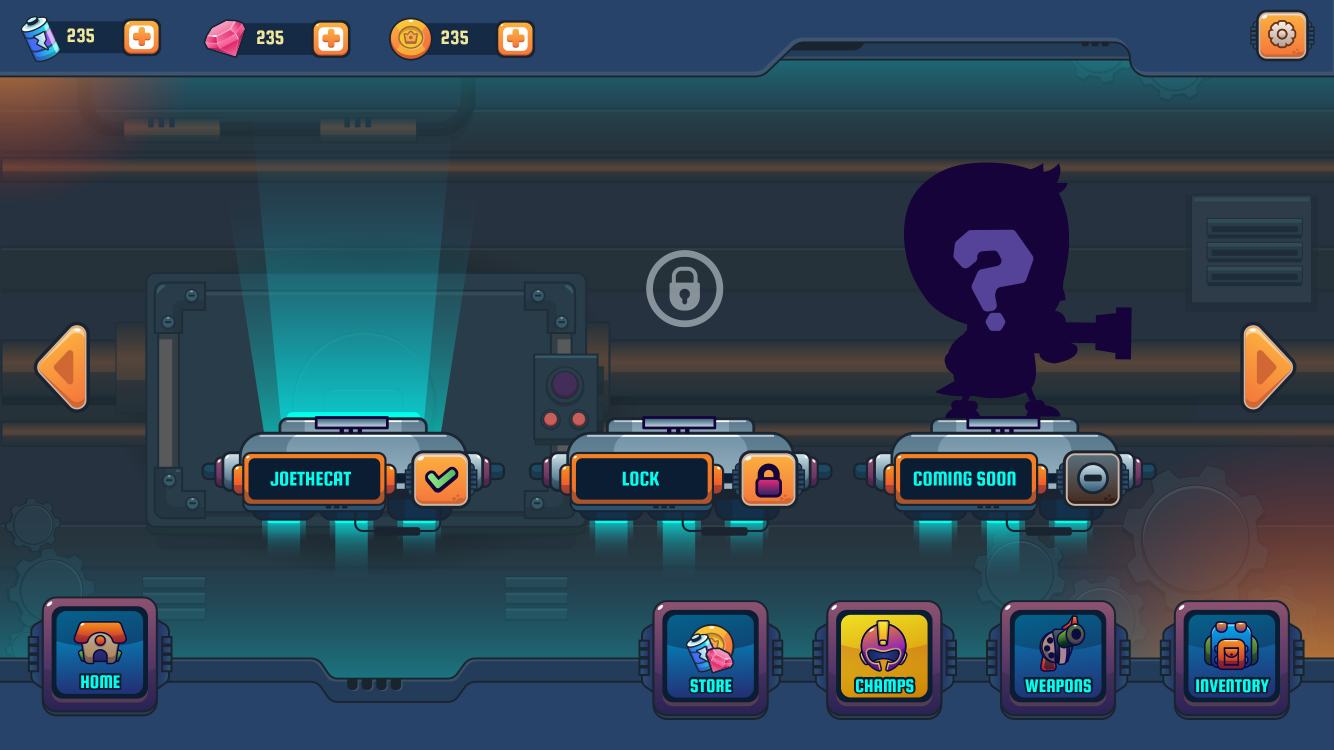
<style>
.page{position:relative;width:1334px;height:750px}
.page>*{position:absolute;margin:0}
.t1{font:20.5px "SquadaOne-Regular";color:#efe79c}
.t2{font:19.5px "SquadaOne-Regular";color:#00ffef;text-transform:uppercase}
</style>
<div class="page">
<p class="t1" style="left:67px;top:28px;width:27px;height:15px">235</p>
<p class="t1" style="left:257px;top:30px;width:27px;height:15px">235</p>
<p class="t1" style="left:441px;top:30px;width:27px;height:15px">235</p>
<p class="t2" style="left:81px;top:675px;width:39px;height:14px">Home</p>
<p class="t2" style="left:81px;top:675px;width:39px;height:14px">Home</p>
<p class="t2" style="left:690px;top:679px;width:42px;height:14px">Store</p>
<p class="t2" style="left:690px;top:679px;width:42px;height:14px">Store</p>
<p class="t2" style="left:856px;top:679px;width:58px;height:14px">champs</p>
<p class="t2" style="left:856px;top:679px;width:58px;height:14px">champs</p>
<p class="t2" style="left:1025px;top:679px;width:66px;height:14px">Weapons</p>
<p class="t2" style="left:1025px;top:679px;width:66px;height:14px">Weapons</p>
<p class="t2" style="left:1196px;top:679px;width:73px;height:14px">Inventory</p>
<p class="t2" style="left:1196px;top:679px;width:73px;height:14px">Inventory</p>
</div>
